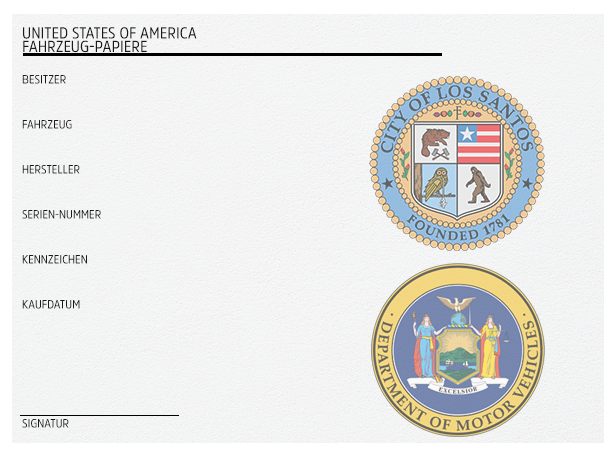
<style>
.page{position:relative;width:615px;height:457px}
.page>*{position:absolute;margin:0}
.t1{font:16px/13.3px "AmsiProNarw-Regular";color:#191919;text-transform:uppercase}
.t2{font:12px/45px "AmsiProNarw-Regular";color:#191919;text-transform:uppercase}
.t3{font:12px "AmsiProNarw-Regular";color:#191919;text-transform:uppercase}
</style>
<div class="page">
<p class="t1" style="left:23px;top:27px;width:174px;height:26px">UNITED STATES OF AMERICA<br>fahrzeug-papiere</p>
<p class="t2" style="left:22px;top:75px;width:79px;height:234px">besitzer<br>Fahrzeug<br>hersteller<br>serien-nummer<br>kennzeichen<br>kaufdatum</p>
<p class="t3" style="left:22px;top:419px;width:47px;height:9px">signatur</p>
</div>
